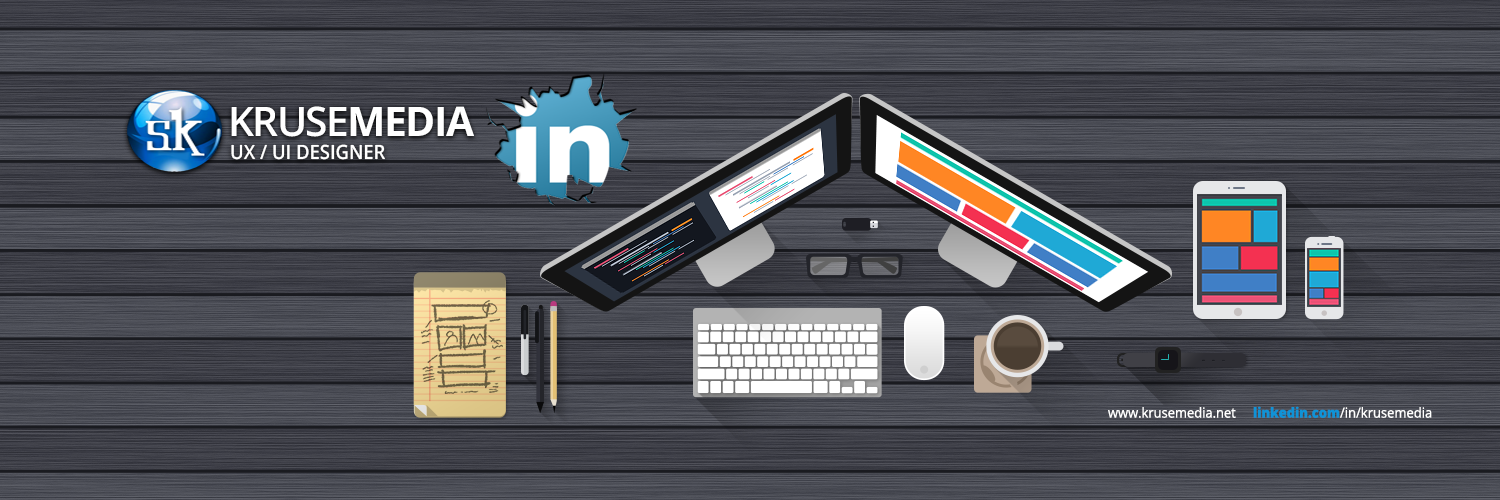
<style>
.page{position:relative;width:1500px;height:500px}
.page>*{position:absolute;margin:0}
.t1{font:40.8px "OpenSans-Semibold";letter-spacing:-0.04em;color:#ffffff}
.t2{font:40.8px "OpenSans-Bold";letter-spacing:-0.04em;color:#ffffff}
.t3{font:19.8px "OpenSans-Semibold";color:#ffffff;text-transform:uppercase;scale:0.93 1}
.t4{font:14px "OpenSans";color:#ffffff;scale:0.92 1}
.t5{font:14px "OpenSans";color:#ffffff;scale:0.93 1}
.t6{font:14px "OpenSans-Extrabold";color:#0f93d7;scale:0.93 1}
</style>
<div class="page">
<p class="t1" style="left:231px;top:106px;width:243px;height:31px">KRUSE<span class="t2">MEDIA</span></p>
<p class="t3" style="left:231px;top:144px;width:154px;height:16px">UX / UI DESIGNER</p>
<p class="t4" style="left:1108px;top:407px;width:128px;height:11px">www.krusemedia.net</p>
<p class="t5" style="left:1253px;top:406px;width:179px;height:12px"><span class="t6">linkedin.com</span>/in/krusemedia</p>
</div>
